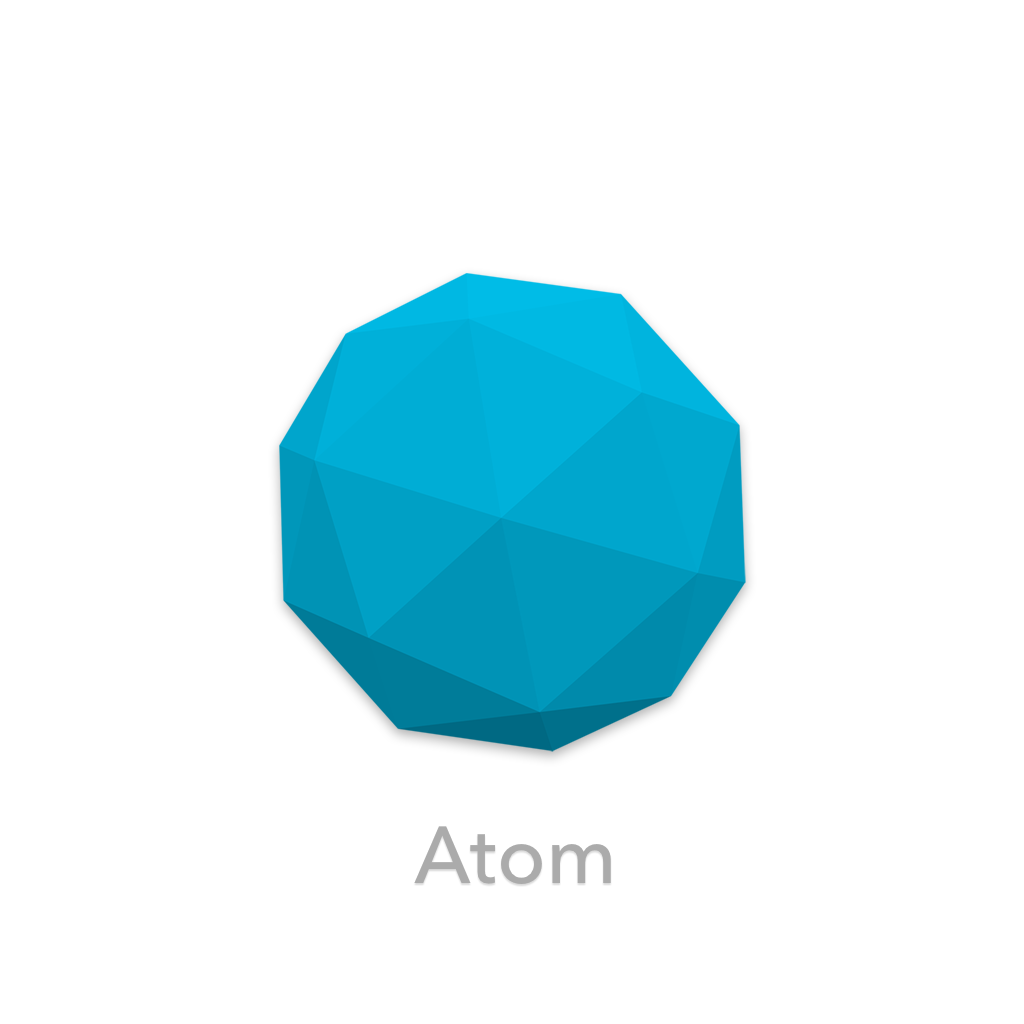
<style>
.page{position:relative;width:1024px;height:1024px;background:#ffffff}
.page>*{position:absolute;margin:0}
.t1{font:80px "AvenirNext-Medium";color:#ababab}
</style>
<div class="page">
<p class="t1" style="left:414px;top:826px;width:197px;height:58px">Atom</p>
</div>
